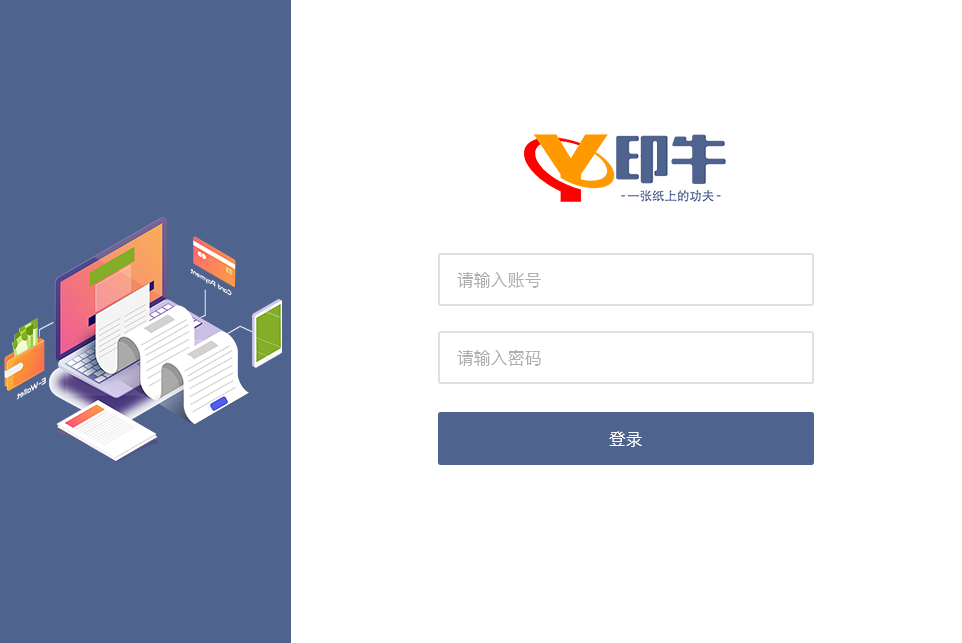
<style>
.page{position:relative;width:962px;height:643px;background:#ffffff}
.page>*{position:absolute;margin:0}
.t1{font:17px "PingFang-SC-Medium";color:#afafaf}
.t2{font:17px "PingFang-SC-Medium";color:#ffffff}
</style>
<div class="page">
<p class="t1" style="left:457px;top:272px;width:84px;height:16px">请输入账号</p>
<p class="t1" style="left:457px;top:350px;width:84px;height:16px">请输入密码</p>
<p class="t2" style="left:609px;top:431px;width:33px;height:16px">登录</p>
</div>
